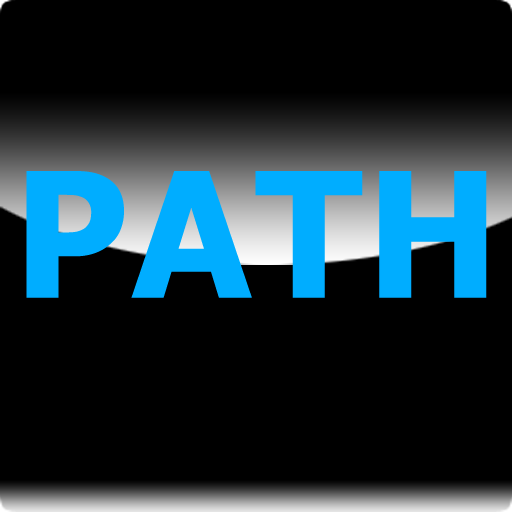
<style>
.page{position:relative;width:512px;height:512px;background:#000000}
.page>*{position:absolute;margin:0}
.t1{font:173.9px "Tahoma-Bold";letter-spacing:0.025em;color:#00adff}
</style>
<div class="page">
<p class="t1" style="left:26px;top:171px;width:461px;height:127px">PATH</p>
</div>
